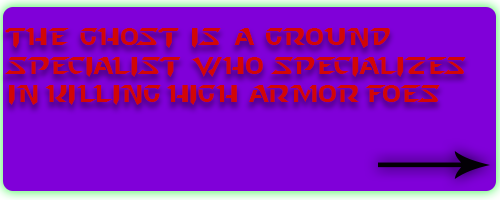
<style>
.page{position:relative;width:500px;height:200px;background:#8000d9}
.page>*{position:absolute;margin:0}
.t1{font:24px "StarcraftNormal";color:#d20606}
</style>
<div class="page">
<p class="t1" style="left:4px;top:28px;width:462px;height:77px">The Ghost is a ground specialist who specializes in killing high armor foes</p>
</div>
